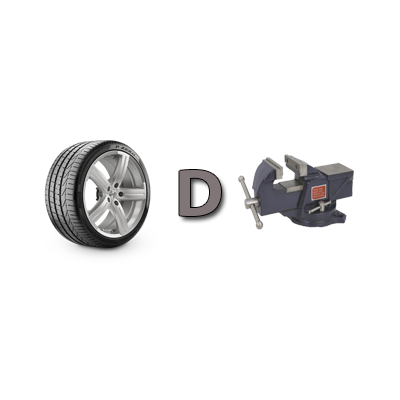
<style>
.page{position:relative;width:400px;height:400px;background:#ffffff}
.page>*{position:absolute;margin:0}
.t1{font:66.2px "MyriadPro-Bold";color:#817677;scale:1.04 1}
</style>
<div class="page">
<p class="t1" style="left:179px;top:170px;width:42px;height:46px">D</p>
</div>
